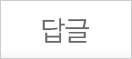
<style>
.page{position:relative;width:132px;height:59px;background:#ffffff}
.page>*{position:absolute;margin:0}
.t1{font:28px "YDVYGO32";color:#666666;scale:0.95 1}
</style>
<div class="page">
<p class="t1" style="left:42px;top:18px;width:48px;height:25px">답글</p>
</div>
